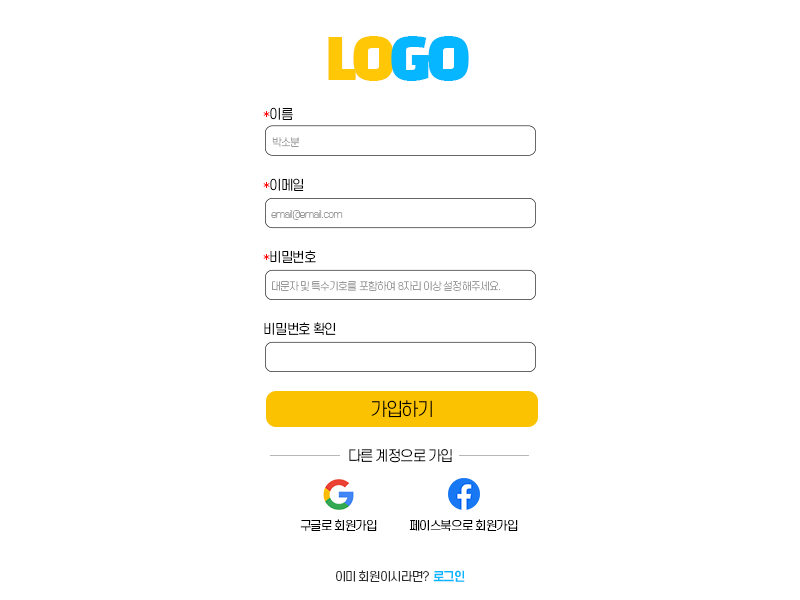
<style>
.page{position:relative;width:800px;height:600px;background:#ffffff}
.page>*{position:absolute;margin:0}
.t1{font:57.2px "BlackHanSans-Regular";letter-spacing:-0.075em;color:#ffc706}
.t2{font:57.2px "BlackHanSans-Regular";letter-spacing:-0.075em;color:#06b6ff}
.t3{font:13.2px "S-CoreDream-3Light";letter-spacing:-0.075em;color:#000000}
.t4{font:10.3px "S-CoreDream-2ExtraLight";letter-spacing:-0.075em;color:#999999}
.t5{font:18px "S-CoreDream-3Light";letter-spacing:-0.075em;color:#000000}
.t6{font:14px "S-CoreDream-3Light";letter-spacing:-0.075em;color:#000000}
.t7{font:12px "S-CoreDream-3Light";letter-spacing:-0.075em;color:#000000}
.t8{font:12px "S-CoreDream-3Light";letter-spacing:-0.075em;color:#2e2b2b}
.t9{font:12px "S-CoreDream-6Bold";letter-spacing:-0.075em;color:#06b6ff}
</style>
<div class="page">
<p class="t1" style="left:328px;top:36px;width:141px;height:45px">LO<span class="t2">GO</span></p>
<p class="t3" style="left:263px;top:107px;width:30px;height:13px">*이름</p>
<p class="t4" style="left:272px;top:137px;width:28px;height:10px">박소분</p>
<p class="t3" style="left:263px;top:178px;width:41px;height:13px">*이메일</p>
<p class="t4" style="left:271px;top:210px;width:72px;height:10px">email@email.com</p>
<p class="t3" style="left:263px;top:250px;width:53px;height:13px">*비밀번호</p>
<p class="t4" style="left:272px;top:281px;width:229px;height:10px">대문자 및 특수기호를 포함하여 8자리 이상 설정해주세요.</p>
<p class="t3" style="left:264px;top:322px;width:72px;height:13px">비밀번호 확인</p>
<p class="t5" style="left:371px;top:400px;width:61px;height:18px">가입하기</p>
<p class="t6" style="left:349px;top:449px;width:103px;height:14px">다른 계정으로 가입</p>
<p class="t7" style="left:300px;top:519px;width:77px;height:12px">구글로 회원가입</p>
<p class="t7" style="left:409px;top:519px;width:109px;height:12px">페이스북으로 회원가입</p>
<p class="t8" style="left:336px;top:570px;width:93px;height:12px">이미 회원이시라면?</p>
<p class="t9" style="left:433px;top:570px;width:32px;height:12px">로그인</p>
</div>
